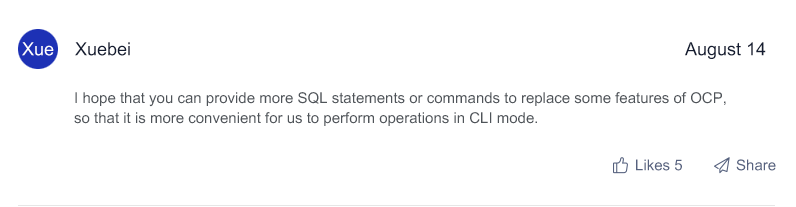
<style>
.page{position:relative;width:796px;height:207px;background:#ffffff}
.page>*{position:absolute;margin:0}
.t1{font:18px "ArialMT";color:#ffffff}
.t2{font:18px "ArialMT";color:#151d31}
.t3{font:15px/20px "ArialMT";color:#4f5459}
.t4{font:15px "ArialMT";color:#56617e}
</style>
<div class="page">
<p class="t1" style="left:22px;top:42px;width:32px;height:14px">Xue</p>
<p class="t2" style="left:75px;top:42px;width:55px;height:14px">Xuebei</p>
<p class="t2" style="left:685px;top:42px;width:81px;height:17px">August 14</p>
<p class="t3" style="left:74px;top:92px;width:652px;height:34px">I hope that you can provide more SQL statements or commands to replace some features of OCP, <br>so that it is more convenient for us to perform operations in CLI mode.</p>
<p class="t4" style="left:636px;top:159px;width:46px;height:12px">Likes 5</p>
<p class="t4" style="left:736px;top:159px;width:40px;height:12px">Share</p>
</div>
